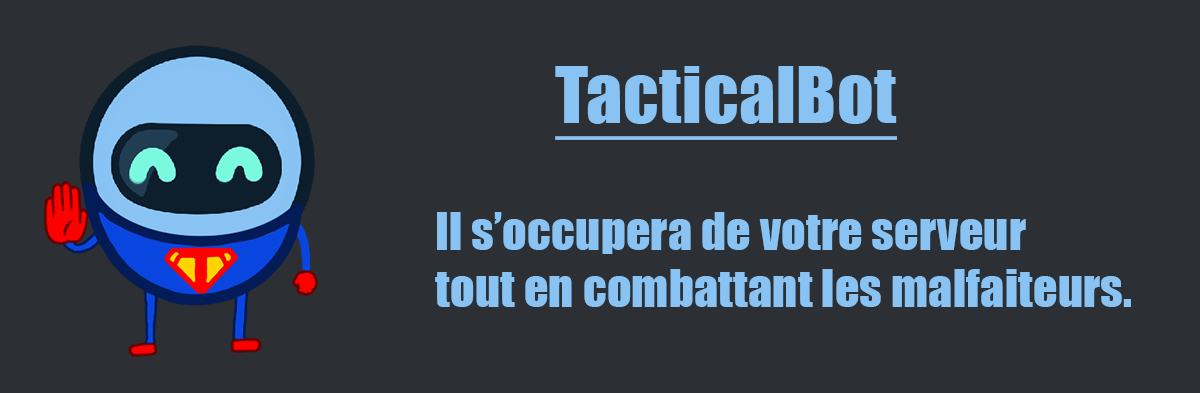
<style>
.page{position:relative;width:1200px;height:393px;background:#2c2f33}
.page>*{position:absolute;margin:0}
.t1{font:72px "Impact";letter-spacing:0.01em;color:#88c3f3;text-decoration:underline}
.t2{font:48px "Impact";letter-spacing:0.005em;color:#88c3f3}
</style>
<div class="page">
<p class="t1" style="left:555px;top:66px;width:342px;height:74px">TacticalBot</p>
<p class="t2" style="left:435px;top:212px;width:696px;height:95px">Il s’occupera de votre serveur<br>tout en combattant les malfaiteurs.</p>
</div>
